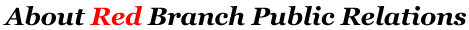
<style>
.page{position:relative;width:469px;height:30px;background:#ffffff}
.page>*{position:absolute;margin:0}
.t1{font:25px "Georgia-BoldItalic";color:#000000}
.t2{font:25px "Georgia-BoldItalic";color:#ff0000}
</style>
<div class="page">
<p class="t1" style="left:3px;top:6px;width:463px;height:20px">About <span class="t2">Red</span> Branch Public Relations</p>
</div>
